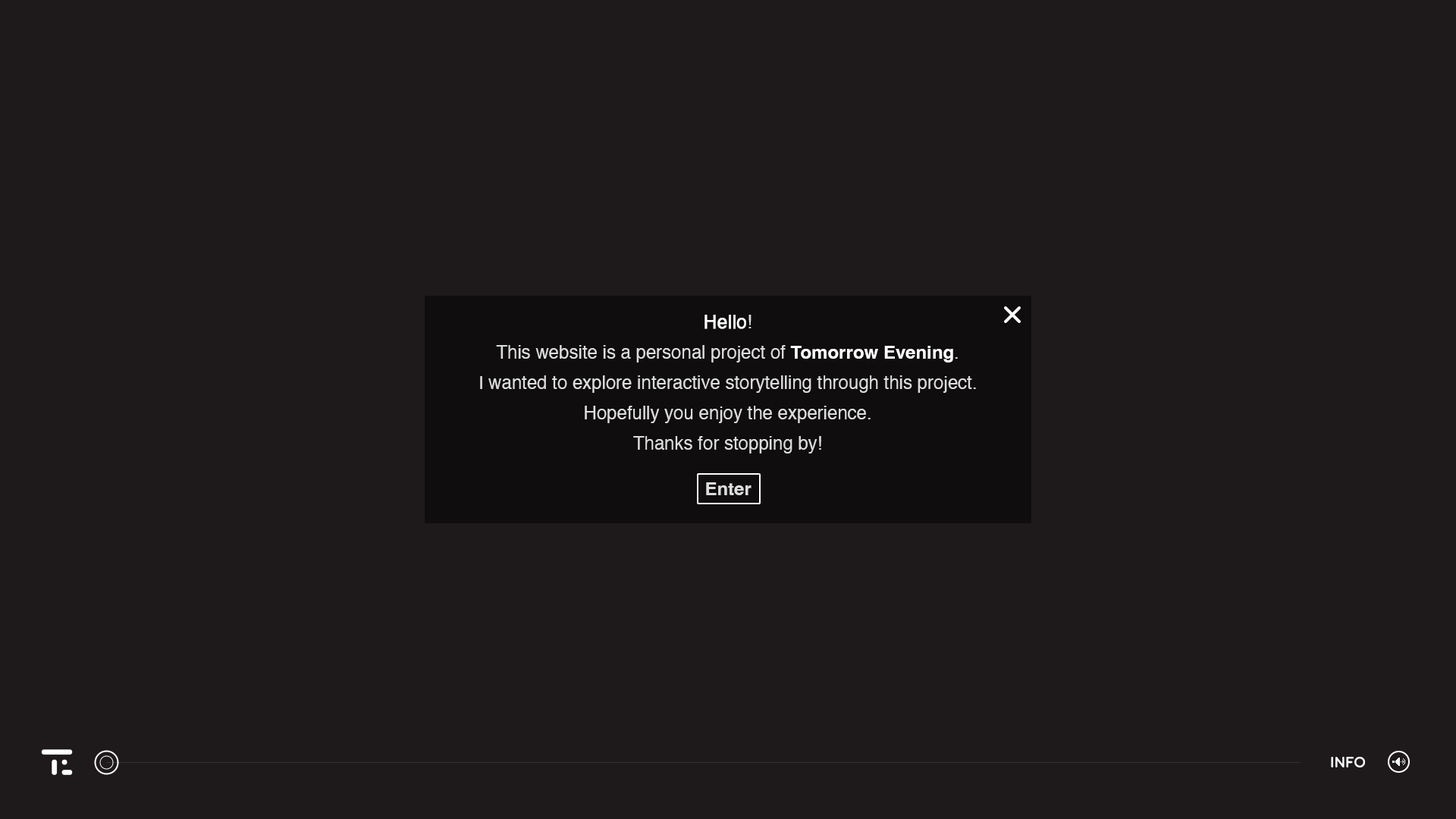
<style>
.page{position:relative;width:1456px;height:819px;background:#1e1a1b}
.page>*{position:absolute;margin:0}
.t1{font:18.2px/15.2px "Helvetica";color:#dddddd}
.t2{font:18.2px/15.2px "Helvetica";color:#ffffff;font-weight:bold}
.t3{font:18.2px/15.2px "Helvetica-Bold";color:#ffffff}
.t4{font:18.2px "Helvetica-Bold";color:#dddddd}
.t5{font:15.2px "Moon-Bold";color:#ffffff;text-transform:uppercase}
</style>
<div class="page">
<p class="t1" style="left:480px;top:315px;width:496px;height:138px;text-align:center"><span class="t2">Hello</span>!<br><br>This website is a personal project of <span class="t3">Tomorrow Evening</span>.<br><br>I wanted to explore interactive storytelling through this project.<br><br>Hopefully you enjoy the experience.<br><br>Thanks for stopping by!</p>
<p class="t4" style="left:706px;top:482px;width:45px;height:13px">Enter</p>
<p class="t5" style="left:1331px;top:757px;width:34px;height:10px">INFO</p>
</div>
